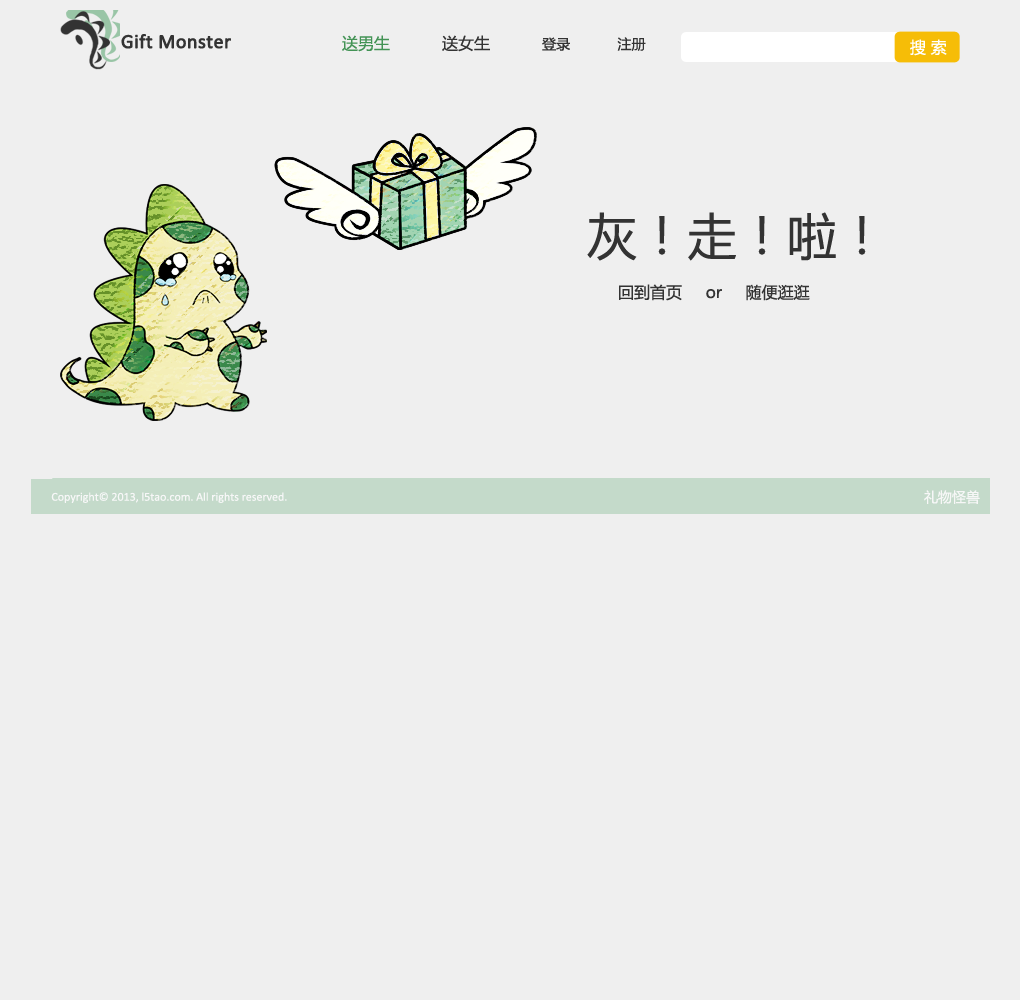
<style>
.page{position:relative;width:1020px;height:1000px;background:#efefef}
.page>*{position:absolute;margin:0}
.t1{font:20px "Calibri";color:#333333;font-weight:bold}
.t2{font:14px "MicrosoftYaHei";color:#333333}
.t3{font:16px "MicrosoftYaHei";color:#439355}
.t4{font:16px "MicrosoftYaHei";color:#333333}
.t5{font:16px "MicrosoftYaHei";color:#ffffff}
.t6{font:50px "MicrosoftYaHei";color:#333333}
.t7{font:12px "Calibri";color:#ffffff}
.t8{font:14px "MicrosoftYaHei";color:#ffffff}
</style>
<div class="page">
<p class="t1" style="left:121px;top:34px;width:110px;height:15px">Gift Monster</p>
<p class="t2" style="left:342px;top:35px;width:304px;height:17px"><span class="t3">送男生</span><span class="t4">           送女生           </span>登录          注册</p>
<p class="t5" style="left:910px;top:39px;width:37px;height:17px">搜 索</p>
<p class="t6" style="left:587px;top:212px;width:279px;height:49px">灰！走！啦！</p>
<p class="t4" style="left:619px;top:284px;width:191px;height:17px">回到首页     or     随便逛逛</p>
<p class="t7" style="left:51px;top:492px;width:236px;height:11px">Copyright© 2013, l5tao.com. All rights reserved.</p>
<p class="t8" style="left:924px;top:490px;width:56px;height:14px">礼物怪兽</p>
</div>
